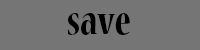
<style>
.page{position:relative;width:200px;height:50px;background:#757575}
.page>*{position:absolute;margin:0}
.t1{font:44px "NuevaStd-BoldCond";color:#000000}
</style>
<div class="page">
<p class="t1" style="left:67px;top:13px;width:63px;height:22px">save</p>
</div>
